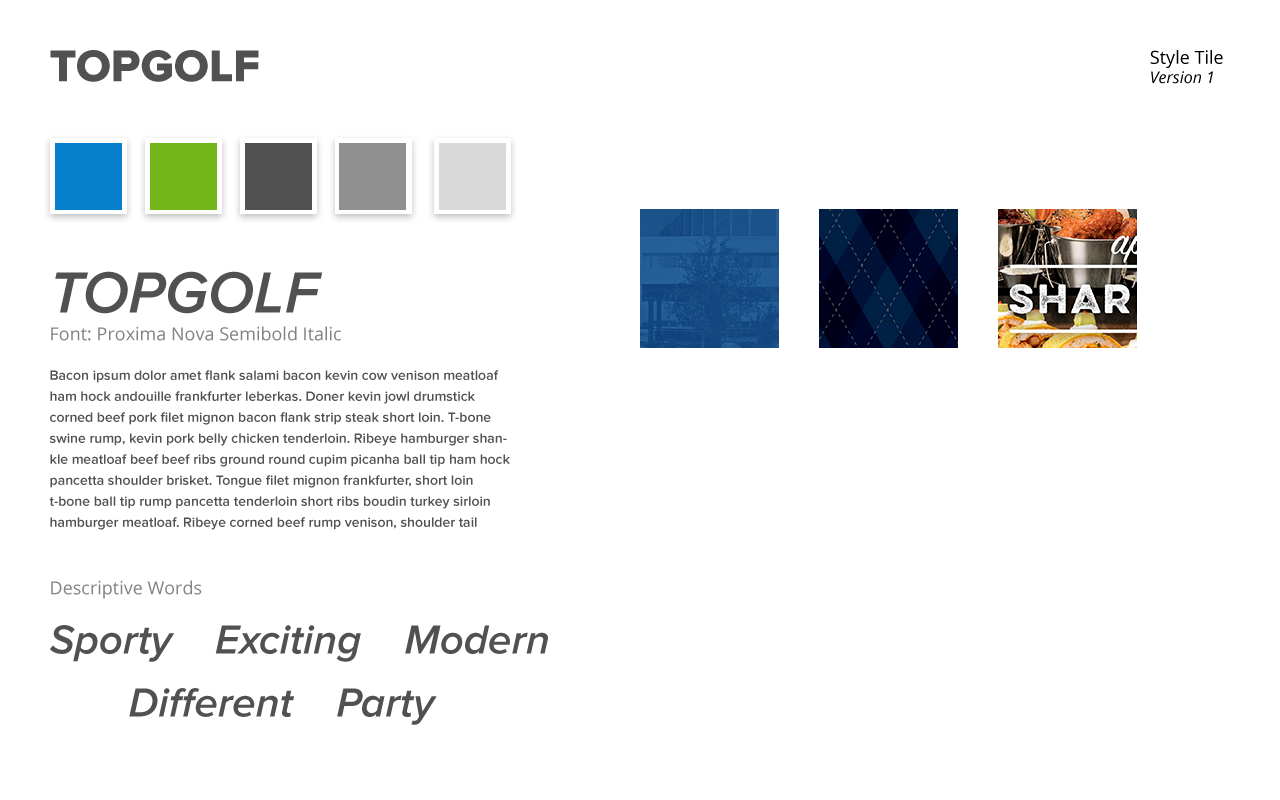
<style>
.page{position:relative;width:1280px;height:800px;background:#ffffff}
.page>*{position:absolute;margin:0}
.t1{font:46px "ProximaNova-Extrabld";color:#515151}
.t2{font:18px "OpenSans";color:#000000}
.t3{font:16px "OpenSans-Italic";color:#000000}
.t4{font:60px "ProximaNova-SemiboldIt";color:#515151}
.t5{font:18px "OpenSans";color:#838282}
.t6{font:14px/21px "ProximaNova-Semibold";color:#515151}
.t7{font:42px "ProximaNova-SemiboldIt";color:#515151}
</style>
<div class="page">
<p class="t1" style="left:50px;top:50px;width:209px;height:32px">TOPGOLF</p>
<p class="t2" style="left:1150px;top:50px;width:73px;height:34px">Style Tile<br><span class="t3">Version 1</span></p>
<p class="t4" style="left:55px;top:271px;width:268px;height:43px">TOPGOLF</p>
<p class="t5" style="left:51px;top:326px;width:290px;height:15px">Font: Proxima Nova Semibold Italic</p>
<p class="t6" style="left:49px;top:370px;width:461px;height:160px">Bacon ipsum dolor amet flank salami bacon kevin cow venison meatloaf ham hock andouille frankfurter leberkas. Doner kevin jowl drumstick corned beef pork filet mignon bacon flank strip steak short loin. T-bone swine rump, kevin pork belly chicken tenderloin. Ribeye hamburger shankle meatloaf beef beef ribs ground round cupim picanha ball tip ham hock pancetta shoulder brisket. Tongue filet mignon frankfurter, short loin t-bone ball tip rump pancetta tenderloin short ribs boudin turkey sirloin hamburger meatloaf. Ribeye corned beef rump venison, shoulder tail tri-tip pork chop andouille pig short loin prosciutto ham.</p>
<p class="t5" style="left:51px;top:580px;width:151px;height:19px">Descriptive Words</p>
<p class="t7" style="left:50px;top:625px;width:498px;height:37px">Sporty    Exciting    Modern</p>
<p class="t7" style="left:129px;top:688px;width:308px;height:37px">Different    Party</p>
</div>
